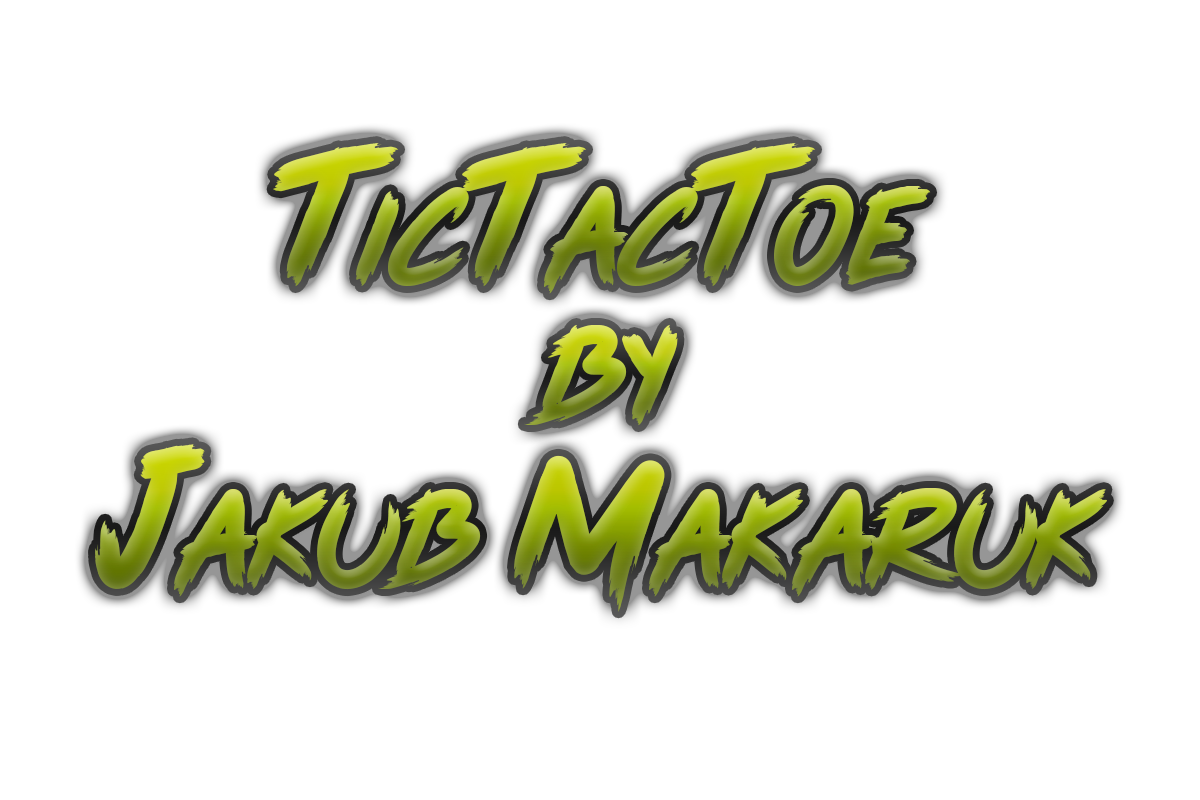
<style>
.page{position:relative;width:1200px;height:800px;background:#ffffff}
.page>*{position:absolute;margin:0}
.t1{font:150px "PinkBlue"}
.t2{font:213.9px "PinkBlue"}
</style>
<div class="page">
<p class="t1" style="left:273px;top:143px;width:658px;height:151px"><span class="t2">T</span>ic<span class="t2">T</span>ac<span class="t2">T</span>oe</p>
<p class="t1" style="left:524px;top:324px;width:154px;height:102px">by</p>
<p class="t1" style="left:95px;top:444px;width:1012px;height:168px"><span class="t2">J</span>akub <span class="t2">m</span>akaruk</p>
</div>
